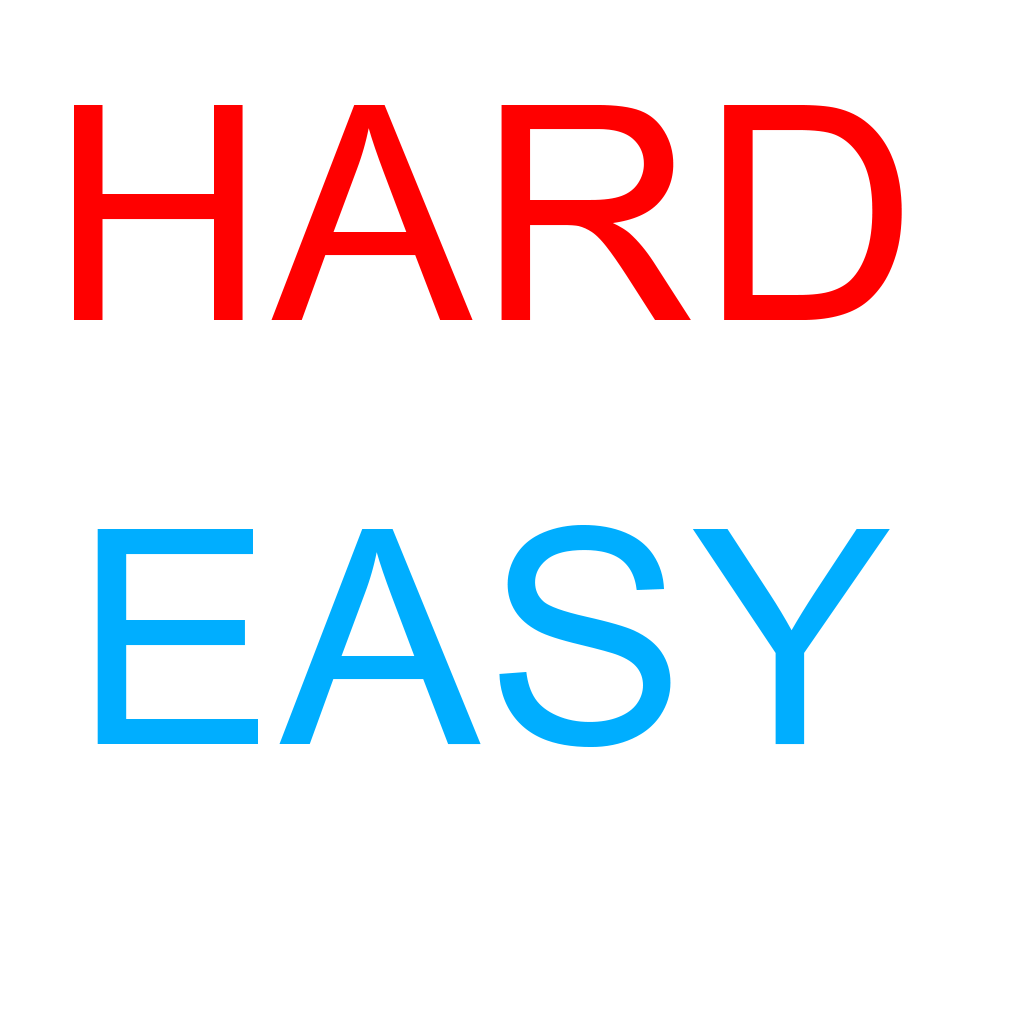
<style>
.page{position:relative;width:1024px;height:1024px;background:#ffffff}
.page>*{position:absolute;margin:0}
.t1{font:300px "ArialMT";letter-spacing:0.02em;color:#ff0000}
.t2{font:300px "ArialMT";letter-spacing:0.02em;color:#00aeff}
</style>
<div class="page">
<p class="t1" style="left:74px;top:105px;width:828px;height:215px">HARD</p>
<p class="t2" style="left:97px;top:525px;width:793px;height:222px">EASY</p>
</div>
